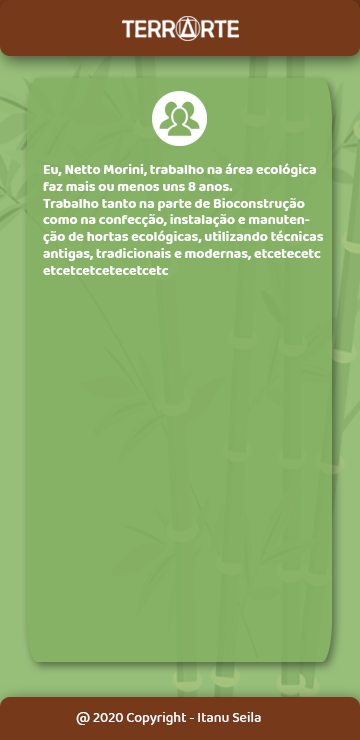
<style>
.page{position:relative;width:360px;height:740px;background:#86b266}
.page>*{position:absolute;margin:0}
.t1{font:14px "Baloo2-Bold";color:#ffffff}
.t2{font:14px "Baloo2-Medium";color:#ffffff}
</style>
<div class="page">
<p class="t1" style="left:43px;top:163px;width:281px;height:112px">Eu, Netto Morini, trabalho na área ecológica<br>faz mais ou menos uns 8 anos.<br>Trabalho tanto na parte de Bioconstrução<br>como na confecção, instalação e manuten-<br>ção de hortas ecológicas, utilizando técnicas <br>antigas, tradicionais e modernas, etcetecetc<br>etcetcetcetecetcetc</p>
<p class="t2" style="left:76px;top:712px;width:185px;height:13px">@ 2020 Copyright - Itanu Seila</p>
</div>
